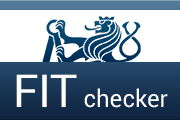
<style>
.page{position:relative;width:180px;height:120px;background:#ffffff}
.page>*{position:absolute;margin:0}
.t1{font:24px "Roboto-Regular";color:#ffffff}
.t2{font:45.6px "Roboto-Regular";color:#ffffff}
</style>
<div class="page">
<p class="t1" style="left:16px;top:74px;width:152px;height:34px"><span class="t2">FIT</span> checker</p>
</div>
